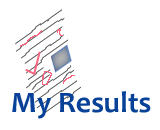
<style>
.page{position:relative;width:160px;height:130px;background:#ffffff}
.page>*{position:absolute;margin:0}
.t1{font:30px "Candara-Bold";color:#084298}
</style>
<div class="page">
<p class="t1" style="left:12px;top:91px;width:139px;height:28px">My Results</p>
</div>
